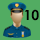
<style>
.page{position:relative;width:40px;height:40px;background:#52ac62}
.page>*{position:absolute;margin:0}
.t1{font:14px "CenturyGothic-Bold";color:#000000}
</style>
<div class="page">
<p class="t1" style="left:24px;top:9px;width:15px;height:12px">10</p>
</div>
